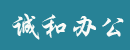
<style>
.page{position:relative;width:130px;height:50px;background:#278296}
.page>*{position:absolute;margin:0}
.t1{font:29.2px "STXingkai";color:#f9faf7}
</style>
<div class="page">
<p class="t1" style="left:12px;top:13px;width:112px;height:27px">诚和办公</p>
</div>
